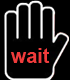
<style>
.page{position:relative;width:70px;height:80px;background:#000000}
.page>*{position:absolute;margin:0}
.t1{font:19.9px "Arial-BoldMT";color:#ef3b3b}
</style>
<div class="page">
<p class="t1" style="left:10px;top:48px;width:40px;height:15px">wait</p>
</div>
